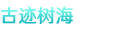
<style>
.page{position:relative;width:128px;height:32px;background:#ffffff}
.page>*{position:absolute;margin:0}
.t1{font:18.7px "HYWenHei-FEW";letter-spacing:0.025em}
</style>
<div class="page">
<p class="t1" style="left:1px;top:6px;width:72px;height:18px">古迹树海</p>
</div>
